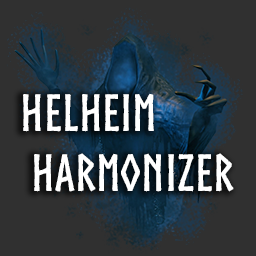
<style>
.page{position:relative;width:256px;height:256px;background:#303030}
.page>*{position:absolute;margin:0}
.t1{font:50px "Norse-Bold";color:#ffffff}
</style>
<div class="page">
<p class="t1" style="left:23px;top:93px;width:211px;height:99px">Helheim<br> Harmonizer</p>
</div>
